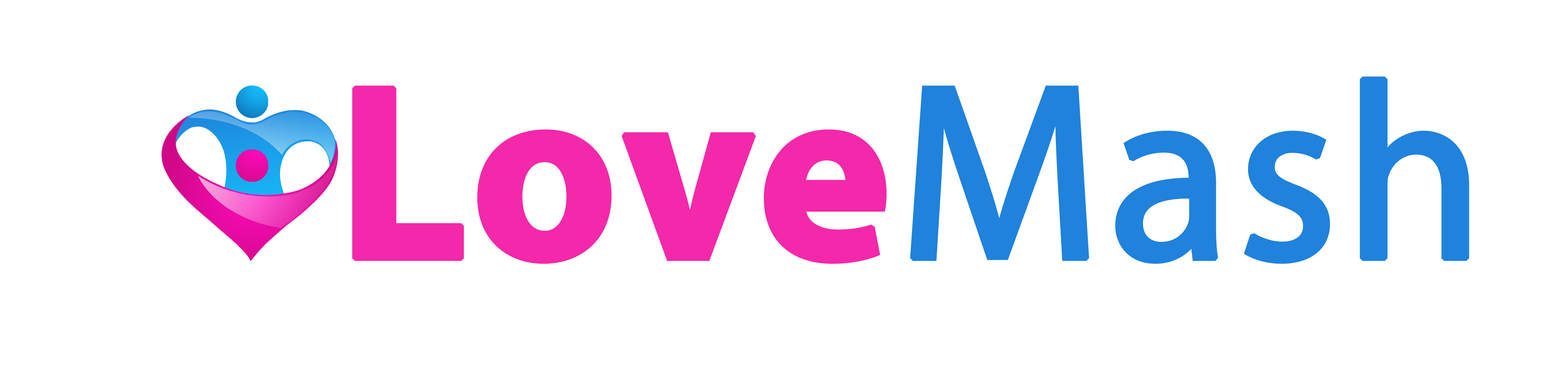
<style>
.page{position:relative;width:1568px;height:376px;background:#ffffff}
.page>*{position:absolute;margin:0}
.t1{font:252.2px "MyriadPro-Bold";color:#f428aa;font-weight:bold}
.t2{font:252.2px "MyriadPro-Regular";color:#1f82dc;font-weight:bold}
</style>
<div class="page">
<p class="t1" style="left:352px;top:77px;width:1117px;height:187px">Love<span class="t2">Mash</span></p>
</div>
